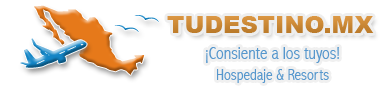
<style>
.page{position:relative;width:385px;height:90px;background:#ffffff}
.page>*{position:absolute;margin:0}
.t1{font:24px "Arial-Black";color:#d68c30}
.t2{font:18px/21px "AbadiMT-CondensedLight";color:#5697cd}
.t3{font:16px/21px "AbadiMT-CondensedLight";color:#5697cd}
</style>
<div class="page">
<p class="t1" style="left:167px;top:16px;width:207px;height:17px">TUDESTINO.MX</p>
<p class="t2" style="left:206px;top:47px;width:133px;height:36px">¡Consiente a los tuyos!<br><span class="t3">   Hospedaje &amp; Resorts</span></p>
</div>
